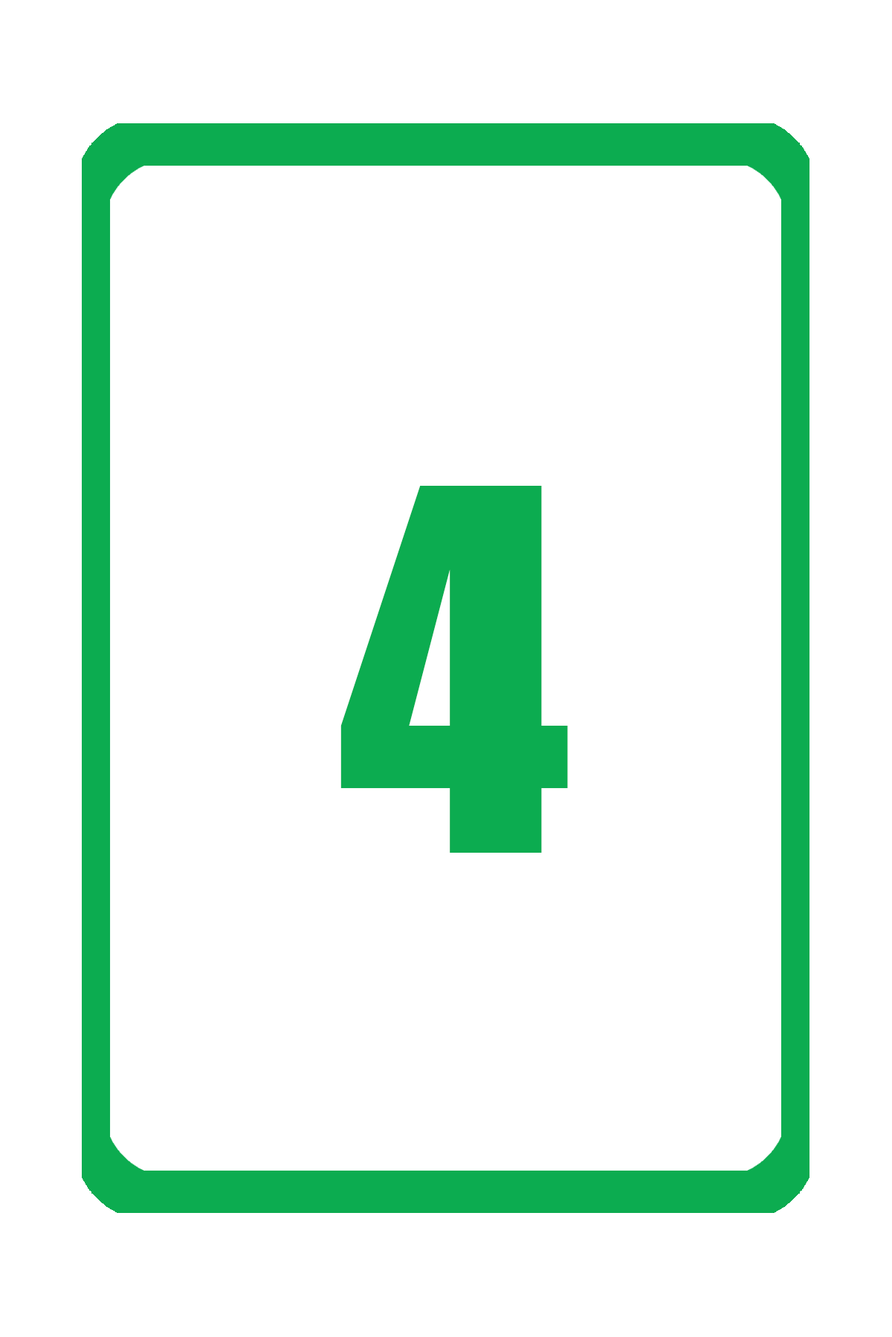
<style>
.page{position:relative;width:892px;height:1337px;background:#ffffff}
.page>*{position:absolute;margin:0}
.t1{font:464.4px "Impact";color:#0cac50}
</style>
<div class="page">
<p class="t1" style="left:340px;top:486px;width:228px;height:367px">4</p>
</div>
